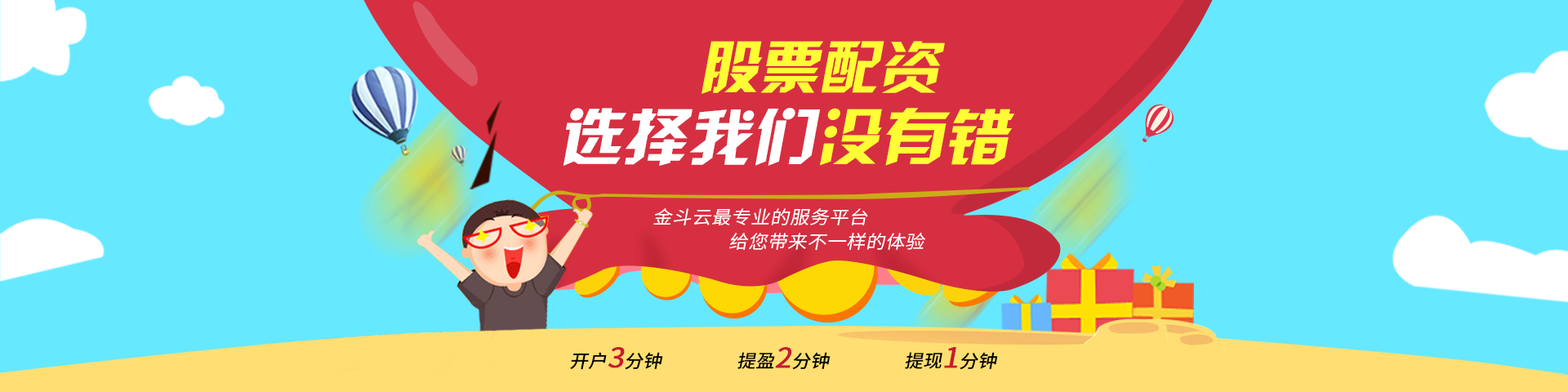
<style>
.page{position:relative;width:1568px;height:392px;background:#66e8ff}
.page>*{position:absolute;margin:0}
.t1{font:57.3px "HYk2gj";color:#fffd36;font-style:italic;scale:1.05 1}
.t2{font:61.4px "HYk2gj";color:#ffffff;font-style:italic;scale:1.05 1}
.t3{font:61.4px "HYk2gj";color:#fffd36;font-style:italic;scale:1.05 1}
.t4{font:18.2px/24.3px "SourceHanSansCN-Normal";letter-spacing:0.025em;color:#ffffff;font-style:italic;scale:1.05 1}
.t5{font:18px "SourceHanSansCN-Medium";color:#000000;font-style:italic;scale:1.05 1}
.t6{font:27.8px "SourceHanSansCN-Regular";color:#c71b2e;font-weight:bold;font-style:italic;scale:1.05 1}
</style>
<div class="page">
<p class="t1" style="left:702px;top:41px;width:243px;height:53px">股票配资</p>
<p class="t2" style="left:563px;top:108px;width:452px;height:58px">选择我们<span class="t3">没有错</span></p>
<p class="t4" style="left:653px;top:208px;width:272px;height:42px">金斗云最专业的服务平台<br>                给您带来不一样的体验</p>
<p class="t5" style="left:570px;top:347px;width:93px;height:23px">开户<span class="t6">3</span>分钟</p>
<p class="t5" style="left:737px;top:347px;width:94px;height:23px">提盈<span class="t6">2</span>分钟</p>
<p class="t5" style="left:905px;top:347px;width:93px;height:23px">提现<span class="t6">1</span>分钟</p>
</div>
